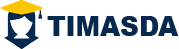
<style>
.page{position:relative;width:179px;height:49px;background:#ffffff}
.page>*{position:absolute;margin:0}
.t1{font:27.5px "Arial-Black";color:#07294d;scale:0.94 1}
</style>
<div class="page">
<p class="t1" style="left:47px;top:16px;width:132px;height:20px">TIMASDA</p>
</div>
